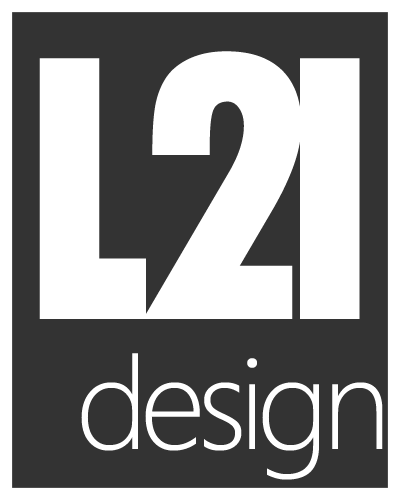
<style>
.page{position:relative;width:400px;height:500px;background:#333333}
.page>*{position:absolute;margin:0}
.t1{font:400px "TwCenMT-CondensedExtraBold";letter-spacing:-0.075em;color:#ffffff}
.t2{font:400px "TwCenMT-CondensedExtraBold";letter-spacing:-0.135em;color:#ffffff}
.t3{font:400px "TwCenMT-CondensedExtraBold";letter-spacing:-0.175em;color:#ffffff}
.t4{font:120px "MicrosoftYaHeiLight";letter-spacing:-0.07em;color:#ffffff}
</style>
<div class="page">
<p class="t1" style="left:39px;top:51px;width:321px;height:268px">L<span class="t2">2</span><span class="t3">I</span></p>
<p class="t4" style="left:81px;top:353px;width:302px;height:127px">design</p>
</div>
